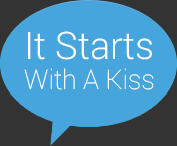
<style>
.page{position:relative;width:177px;height:146px;background:#46a5dd}
.page>*{position:absolute;margin:0}
.t1{font:26.9px/29.8px "Roboto-Thin";color:#ffffff}
.t2{font:37.9px/29.8px "Roboto-Light";color:#ffffff}
</style>
<div class="page">
<p class="t1" style="left:24px;top:31px;width:130px;height:59px;text-align:center"><span class="t2">It Starts<br></span>With A Kiss</p>
</div>
